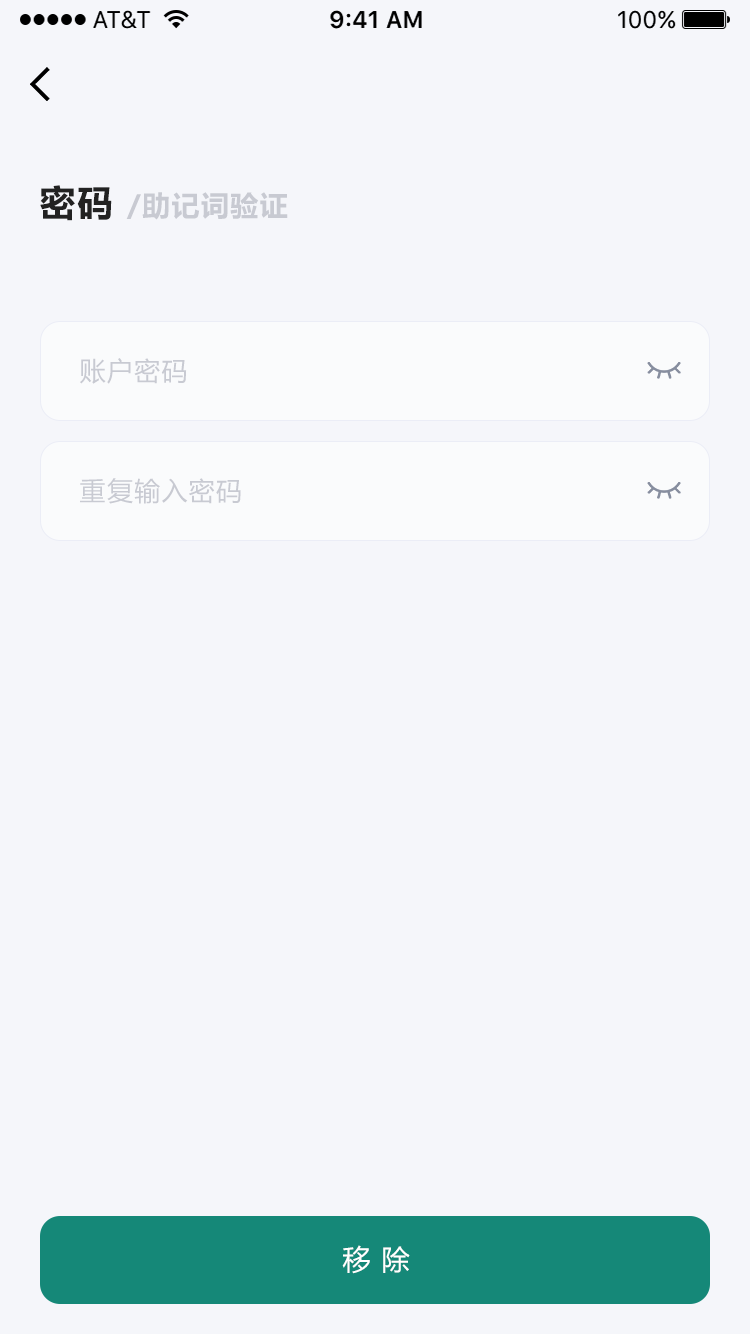
<style>
.page{position:relative;width:750px;height:1334px;background:#f5f6fa}
.page>*{position:absolute;margin:0}
.t1{font:28px "MicrosoftYaHei-Bold";letter-spacing:0.05em;color:#c8cad2}
.t2{font:36px "MicrosoftYaHei-Bold";letter-spacing:0.05em;color:#222222}
.t3{font:26px "MicrosoftYaHei";letter-spacing:0.05em;color:#c8cad2}
.t4{font:28px "MicrosoftYaHei";letter-spacing:0.05em;color:#ffffff}
</style>
<div class="page">
<p class="t1" style="left:40px;top:185px;width:248px;height:36px"><span class="t2">密码 </span>/助记词验证</p>
<p class="t3" style="left:80px;top:358px;width:107px;height:26px">账户密码</p>
<p class="t3" style="left:80px;top:478px;width:161px;height:26px">重复输入密码</p>
<p class="t4" style="left:342px;top:1245px;width:68px;height:29px">移 除</p>
</div>
